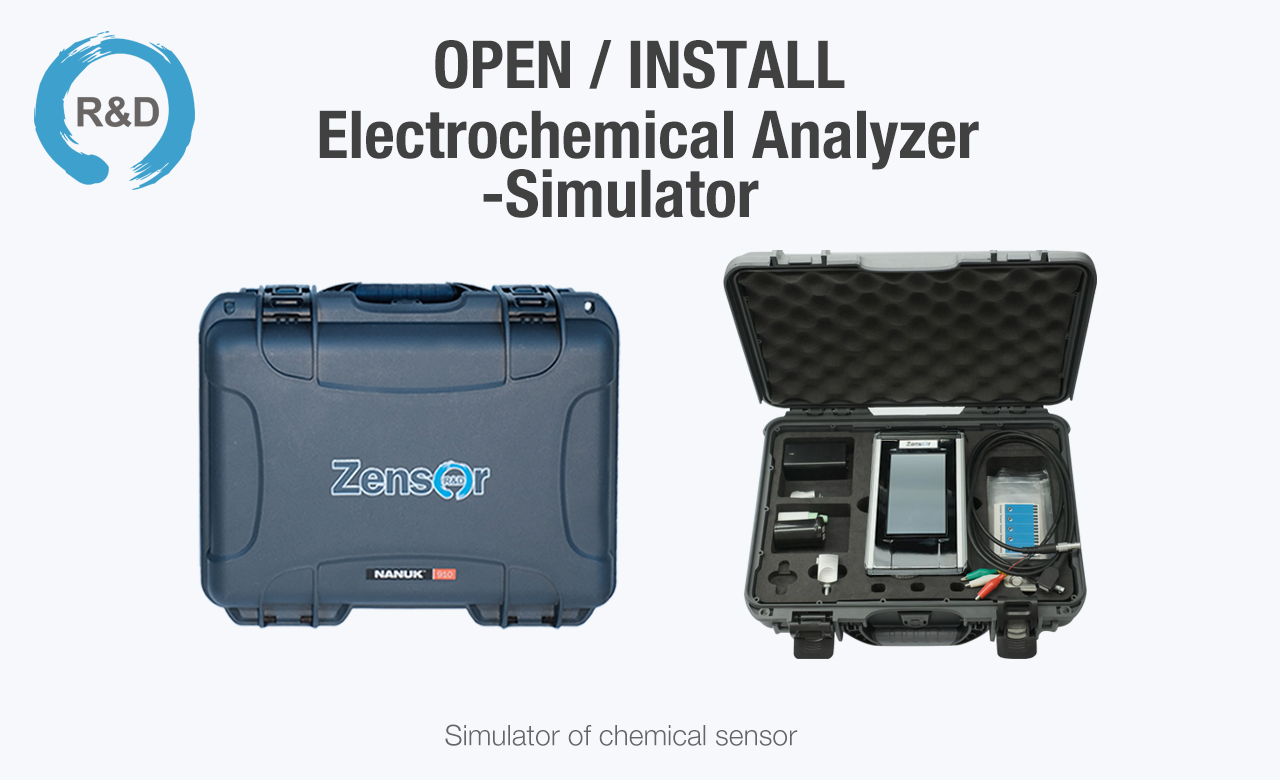
<style>
.page{position:relative;width:1280px;height:780px;background:#f7f8fb}
.page>*{position:absolute;margin:0}
.t1{font:65.9px "HelveticaNeue-CondensedBold";color:#414141}
.t2{font:28.4px "HelveticaNeue-Light";color:#656565}
</style>
<div class="page">
<p class="t1" style="left:435px;top:40px;width:410px;height:49px">OPEN / INSTALL</p>
<p class="t1" style="left:319px;top:110px;width:660px;height:60px">Electrochemical Analyzer</p>
<p class="t1" style="left:483px;top:169px;width:276px;height:49px">-Simulator</p>
<p class="t2" style="left:445px;top:724px;width:353px;height:22px">Simulator of chemical sensor</p>
</div>
